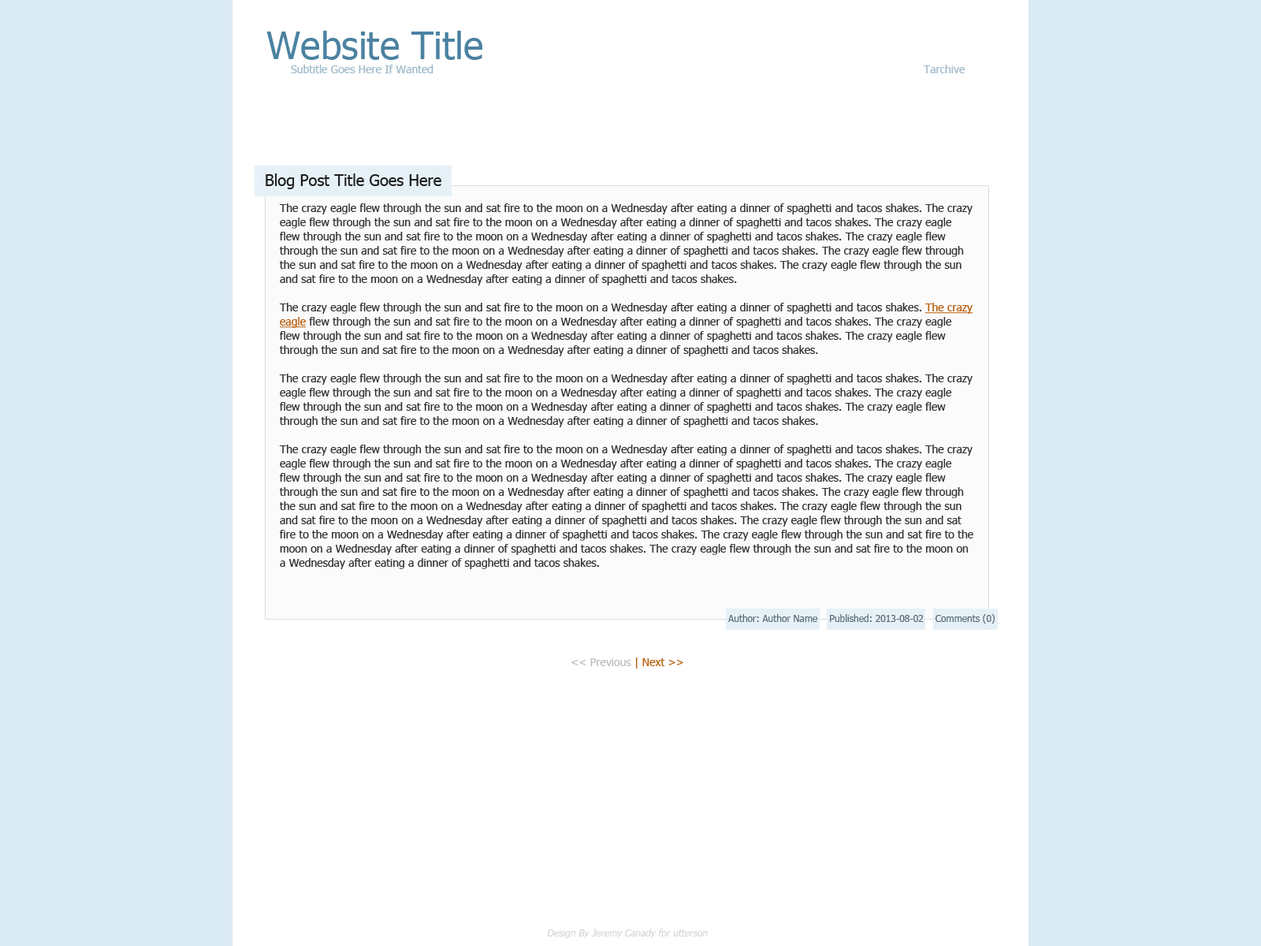
<style>
.page{position:relative;width:1261px;height:946px;background:#dbebf4}
.page>*{position:absolute;margin:0}
.t1{font:37.8px "Tahoma";color:#4b82a1}
.t2{font:11px "Tahoma";color:#9eb9c9}
.t3{font:15.8px "Tahoma";color:#1e1e1e}
.t4{font:11px/14.2px "Tahoma";color:#323334}
.t5{font:11px/14.2px "Tahoma";color:#b65c0b;text-decoration:underline}
.t6{font:9.5px "Tahoma";color:#596b75}
.t7{font:11px "Tahoma";color:#bdbdbd}
.t8{font:11px "Tahoma";color:#b65c0b}
.t9{font:9.5px "Tahoma";color:#d6d6d6;font-style:italic}
</style>
<div class="page">
<p class="t1" style="left:266px;top:31px;width:216px;height:29px">Website Title</p>
<p class="t2" style="left:291px;top:65px;width:142px;height:8px">Subtitle Goes Here If Wanted</p>
<p class="t2" style="left:923px;top:65px;width:42px;height:8px">Tarchive</p>
<p class="t3" style="left:266px;top:173px;width:175px;height:16px">Blog Post Title Goes Here</p>
<p class="t4" style="left:279px;top:203px;width:694px;height:366px">The crazy eagle flew through the sun and sat fire to the moon on a Wednesday after eating a dinner of spaghetti and tacos shakes. The crazy eagle flew through the sun and sat fire to the moon on a Wednesday after eating a dinner of spaghetti and tacos shakes. The crazy eagle flew through the sun and sat fire to the moon on a Wednesday after eating a dinner of spaghetti and tacos shakes. The crazy eagle flew through the sun and sat fire to the moon on a Wednesday after eating a dinner of spaghetti and tacos shakes. The crazy eagle flew through the sun and sat fire to the moon on a Wednesday after eating a dinner of spaghetti and tacos shakes. The crazy eagle flew through the sun and sat fire to the moon on a Wednesday after eating a dinner of spaghetti and tacos shakes. <br><br>The crazy eagle flew through the sun and sat fire to the moon on a Wednesday after eating a dinner of spaghetti and tacos shakes. <span class="t5">The crazy eagle</span> flew through the sun and sat fire to the moon on a Wednesday after eating a dinner of spaghetti and tacos shakes. The crazy eagle flew through the sun and sat fire to the moon on a Wednesday after eating a dinner of spaghetti and tacos shakes. The crazy eagle flew through the sun and sat fire to the moon on a Wednesday after eating a dinner of spaghetti and tacos shakes. <br><br>The crazy eagle flew through the sun and sat fire to the moon on a Wednesday after eating a dinner of spaghetti and tacos shakes. The crazy eagle flew through the sun and sat fire to the moon on a Wednesday after eating a dinner of spaghetti and tacos shakes. The crazy eagle flew through the sun and sat fire to the moon on a Wednesday after eating a dinner of spaghetti and tacos shakes. The crazy eagle flew through the sun and sat fire to the moon on a Wednesday after eating a dinner of spaghetti and tacos shakes. <br><br>The crazy eagle flew through the sun and sat fire to the moon on a Wednesday after eating a dinner of spaghetti and tacos shakes. The crazy eagle flew through the sun and sat fire to the moon on a Wednesday after eating a dinner of spaghetti and tacos shakes. The crazy eagle flew through the sun and sat fire to the moon on a Wednesday after eating a dinner of spaghetti and tacos shakes. The crazy eagle flew through the sun and sat fire to the moon on a Wednesday after eating a dinner of spaghetti and tacos shakes. The crazy eagle flew through the sun and sat fire to the moon on a Wednesday after eating a dinner of spaghetti and tacos shakes. The crazy eagle flew through the sun and sat fire to the moon on a Wednesday after eating a dinner of spaghetti and tacos shakes. The crazy eagle flew through the sun and sat fire to the moon on a Wednesday after eating a dinner of spaghetti and tacos shakes. The crazy eagle flew through the sun and sat fire to the moon on a Wednesday after eating a dinner of spaghetti and tacos shakes. The crazy eagle flew through the sun and sat fire to the moon on a Wednesday after eating a dinner of spaghetti and tacos shakes. <br><br>The crazy eagle flew through the sun and sat fire to the moon on a Wednesday after eating a dinner of spaghetti and tacos shakes. The crazy eagle flew through the sun and sat fire to the moon on a Wednesday after eating a dinner of spaghetti and tacos shakes. The crazy eagle flew through the sun and sat fire to the moon on a Wednesday after eating a dinner of spaghetti and tacos shakes.</p>
<p class="t6" style="left:728px;top:614px;width:267px;height:9px">Author: Author Name    Published: 2013-08-02    Comments (0)</p>
<p class="t7" style="left:571px;top:657px;width:112px;height:11px">&lt;&lt; Previous <span class="t8">| Next &gt;&gt;</span></p>
<p class="t9" style="left:547px;top:928px;width:161px;height:10px">Design By Jeremy Canady for utterson</p>
</div>
